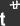
<style>
.page{position:relative;width:20px;height:26px;background:#333333}
.page>*{position:absolute;margin:0}
.t1{font:12px "DFKaiShu-SB-Estd-BF";color:#ffffff;font-weight:bold}
.t2{font:18px "ArialMT";color:#ffffff;font-weight:bold}
</style>
<div class="page">
<p class="t1" style="left:9px;top:0px;width:12px;height:9px">廿</p>
<p class="t2" style="left:0px;top:12px;width:6px;height:14px">t</p>
</div>
